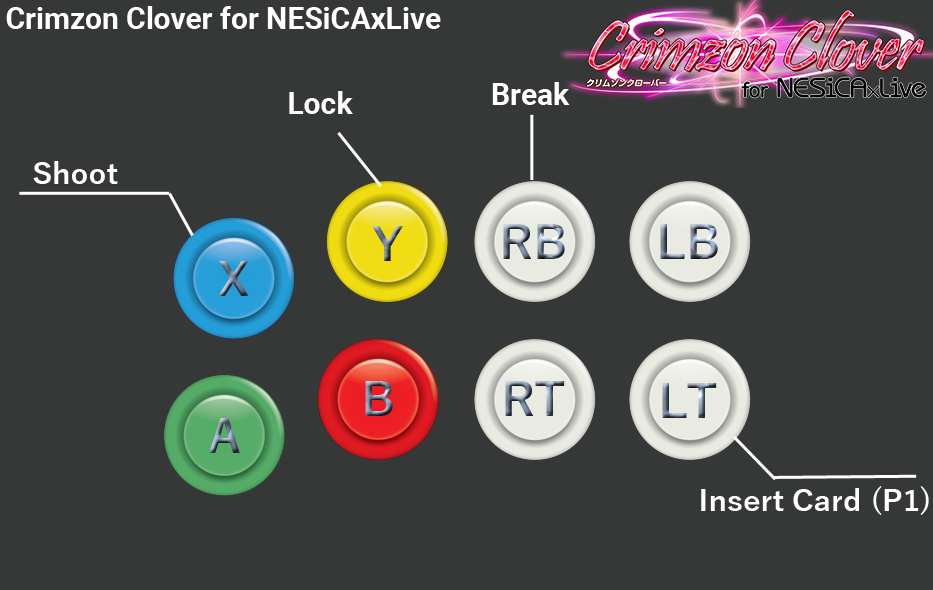
<style>
.page{position:relative;width:933px;height:590px;background:#363838}
.page>*{position:absolute;margin:0}
.t1{font:30px "Roboto-Bold";color:#ffffff}
.t2{font:30px "YuGothic-Bold";color:#ffffff}
</style>
<div class="page">
<p class="t1" style="left:6px;top:6px;width:435px;height:23px">Crimzon Clover for NESiCAxLive</p>
<p class="t1" style="left:492px;top:82px;width:78px;height:23px">Break</p>
<p class="t1" style="left:289px;top:91px;width:64px;height:23px">Lock</p>
<p class="t2" style="left:33px;top:161px;width:85px;height:23px">Shoot</p>
<p class="t2" style="left:701px;top:486px;width:228px;height:29px">Insert Card (P1)</p>
</div>
